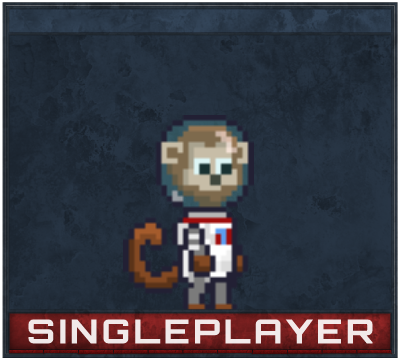
<style>
.page{position:relative;width:400px;height:360px}
.page>*{position:absolute;margin:0}
.t1{font:33.2px "Orbitron-Bold";letter-spacing:0.1em;color:#ffffff;font-weight:bold}
</style>
<div class="page">
<p class="t1" style="left:28px;top:319px;width:345px;height:25px;opacity:0.9">SINGLEPLAYER</p>
</div>
